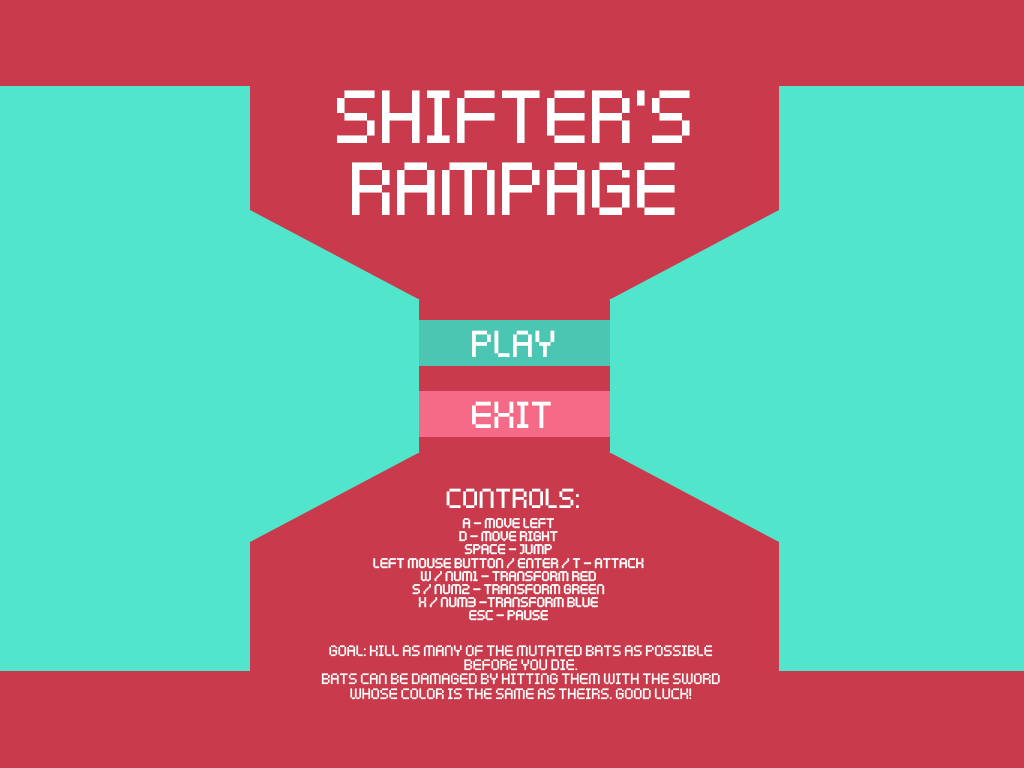
<style>
.page{position:relative;width:1024px;height:768px;background:#51e6cc}
.page>*{position:absolute;margin:0}
.t1{font:60px "KenPixel";color:#ffffff}
.t2{font:30px "KenPixel";color:#ffffff}
.t3{font:22px "KenPixel";color:#ffffff}
.t4{font:11px "KenPixel";color:#ffffff}
.t5{font:12px "KenPixel";color:#ffffff}
</style>
<div class="page">
<p class="t1" style="left:337px;top:90px;width:353px;height:125px;text-align:center">Shifter’s<br>Rampage</p>
<p class="t2" style="left:472px;top:330px;width:83px;height:27px">PLAY</p>
<p class="t2" style="left:472px;top:401px;width:79px;height:27px">EXIT</p>
<p class="t3" style="left:446px;top:488px;width:133px;height:20px">Controls:</p>
<p class="t4" style="left:373px;top:518px;width:271px;height:103px;text-align:center">A - Move left<br>D - Move right<br>SPACE - Jump<br>Left mouse button / ENTER / T - attack<br>W / Num1 - Transform red<br>S / num2 - Transform Green<br>X / num3 -Transform blue<br>ESC - Pause</p>
<p class="t5" style="left:321px;top:645px;width:399px;height:55px;text-align:center">Goal: Kill as many of the mutated bats as possible before you die.<br>Bats can be damaged by hitting them with the sword whose color is the same as theirs. Good luck!</p>
</div>
